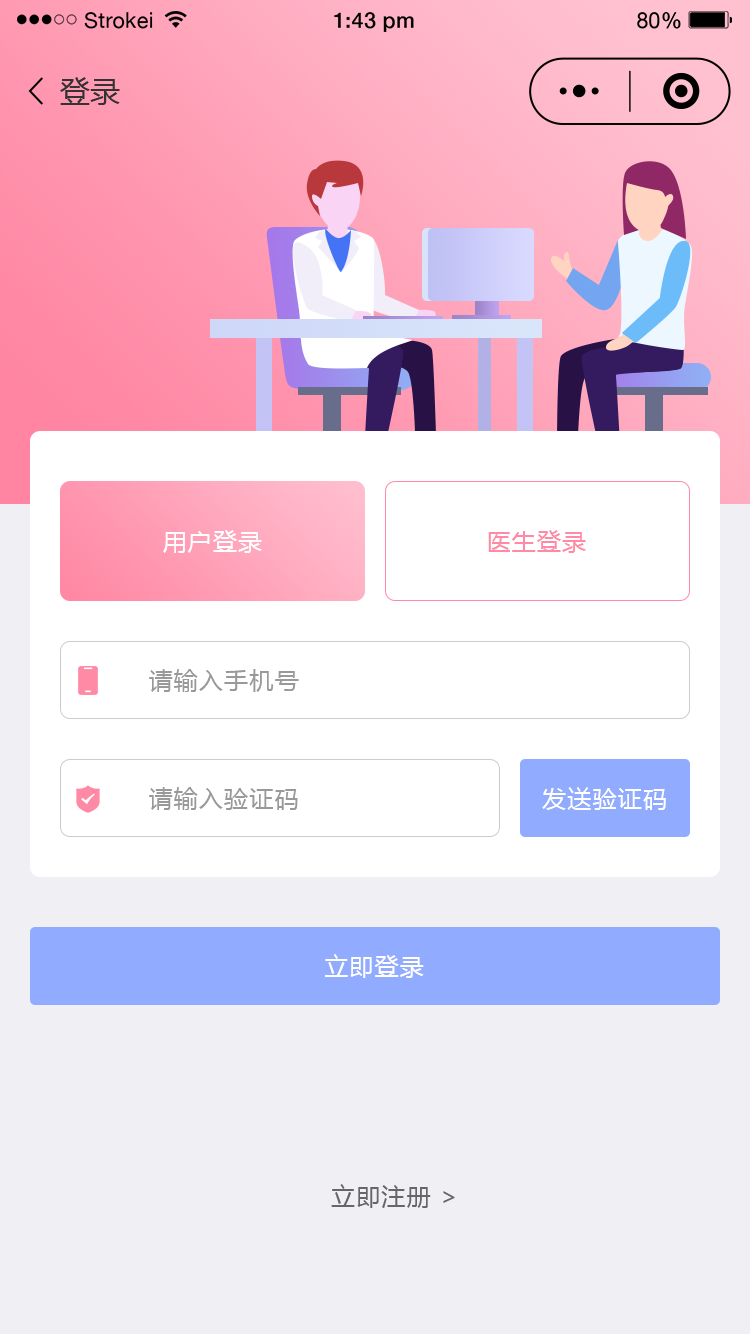
<style>
.page{position:relative;width:750px;height:1334px;background:#efeff4}
.page>*{position:absolute;margin:0}
.t1{font:30px "MicrosoftYaHei";color:#333333}
.t2{font:24px "MicrosoftYaHei";letter-spacing:0.05em;color:#ffffff}
.t3{font:24px "MicrosoftYaHei";letter-spacing:0.05em;color:#ff8aa6}
.t4{font:24px "MicrosoftYaHei";letter-spacing:0.05em;color:#999999}
.t5{font:24px "MicrosoftYaHei";letter-spacing:0.05em;color:#666666}
</style>
<div class="page">
<p class="t1" style="left:60px;top:77px;width:60px;height:28px">登录</p>
<p class="t2" style="left:163px;top:530px;width:99px;height:23px">用户登录</p>
<p class="t3" style="left:488px;top:530px;width:98px;height:23px">医生登录</p>
<p class="t4" style="left:149px;top:669px;width:150px;height:23px">请输入手机号</p>
<p class="t4" style="left:149px;top:787px;width:149px;height:23px">请输入验证码</p>
<p class="t2" style="left:542px;top:787px;width:124px;height:23px">发送验证码</p>
<p class="t2" style="left:325px;top:954px;width:99px;height:24px">立即登录</p>
<p class="t5" style="left:331px;top:1184px;width:124px;height:24px">立即注册 &gt;</p>
</div>
